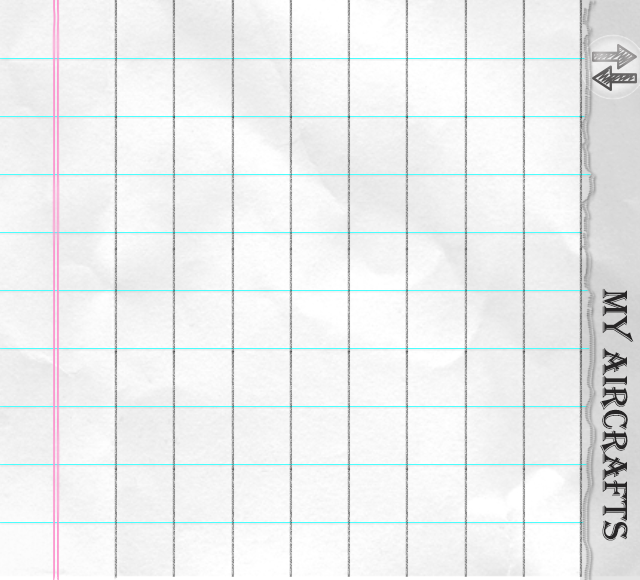
<style>
.page{position:relative;width:640px;height:580px}
.page>*{position:absolute;margin:0}
.t1{font:36px "Algerian";color:#272526}
</style>
<div class="page">
<p class="t1" style="left:600px;top:288px;width:34px;height:253px">My Aircrafts</p>
</div>
